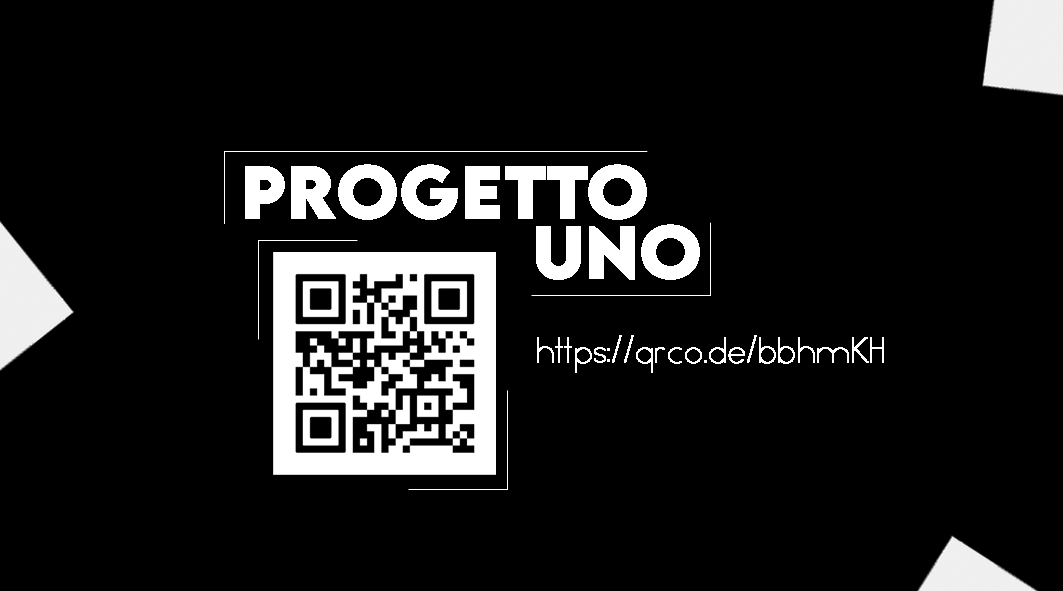
<style>
.page{position:relative;width:1063px;height:591px;background:#000000}
.page>*{position:absolute;margin:0}
.t1{font:66.7px "LEMONMILK-Bold";color:#ffffff;font-weight:bold}
.t2{font:41.7px "Minimal";color:#ffffff;font-weight:bold}
</style>
<div class="page">
<p class="t1" style="left:245px;top:164px;width:402px;height:56px">PROGETTO</p>
<p class="t1" style="left:536px;top:224px;width:164px;height:56px">UNO</p>
<p class="t2" style="left:537px;top:335px;width:347px;height:38px">https://qrco.de/bbhmKH</p>
</div>
